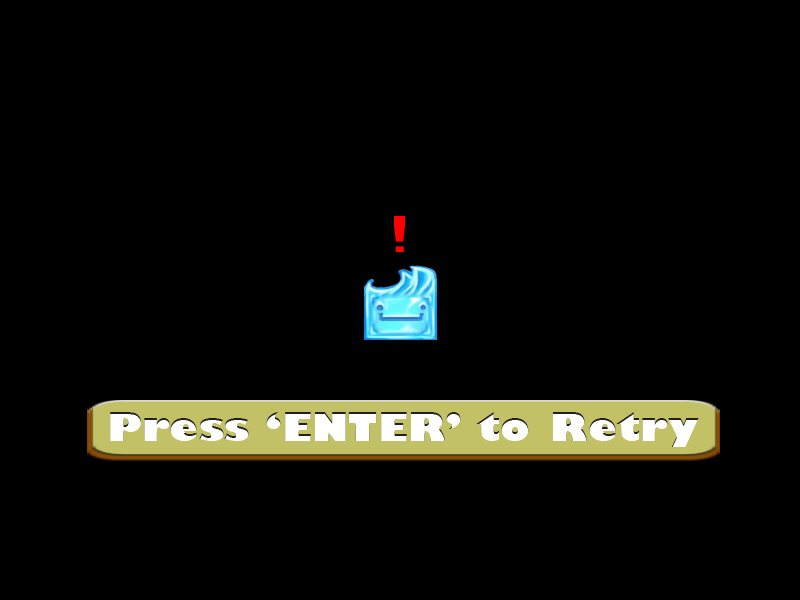
<style>
.page{position:relative;width:800px;height:600px;background:#000000}
.page>*{position:absolute;margin:0}
.t1{font:37.9px "GillSans-UltraBoldCondensed";color:#ffffff;scale:1.62 1}
</style>
<div class="page">
<p class="t1" style="left:110px;top:412px;width:589px;height:35px">Press ‘ENTER’ to Retry</p>
</div>
